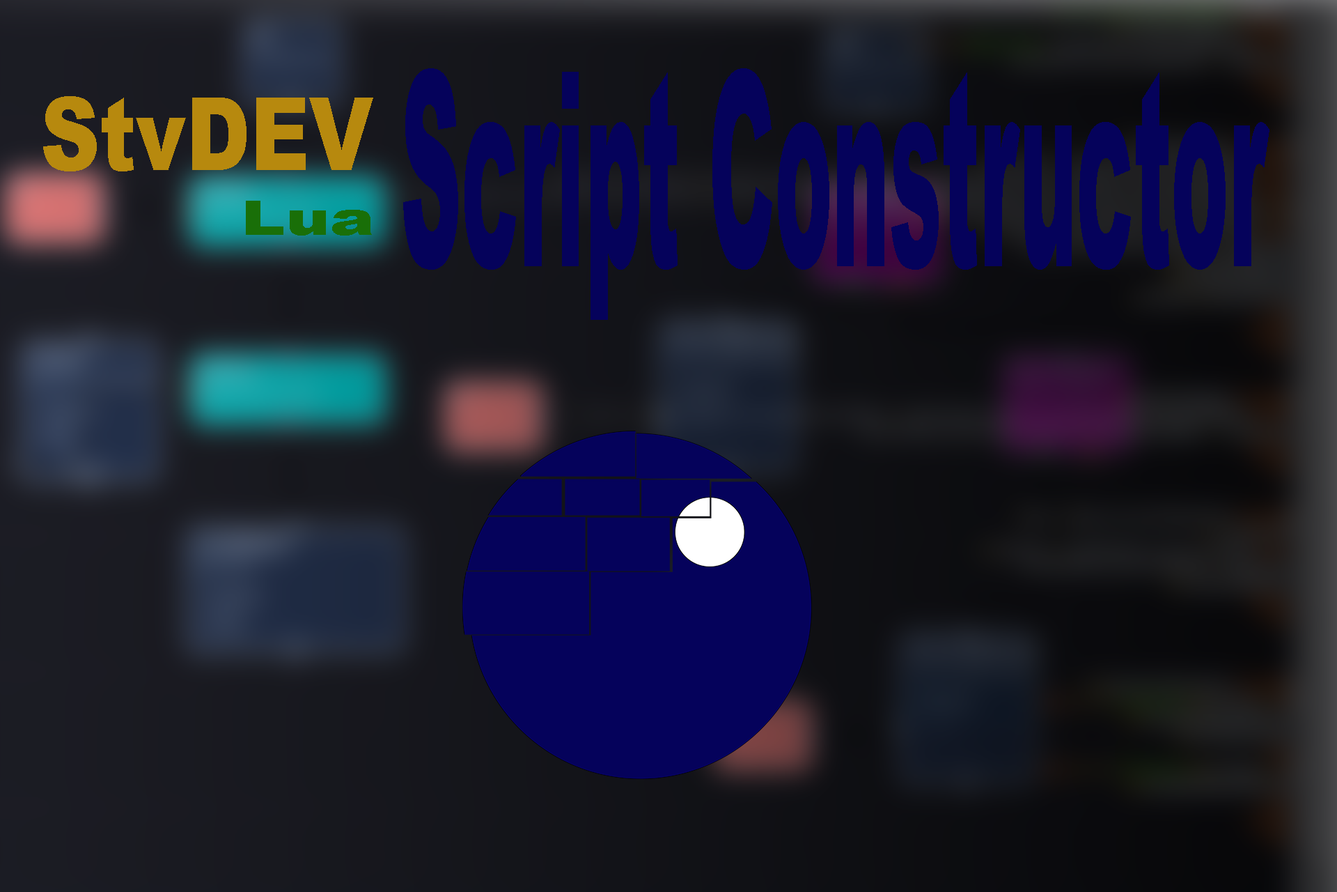
<style>
.page{position:relative;width:1337px;height:892px}
.page>*{position:absolute;margin:0}
.t1{font:271.9px "Arial-Black";color:#05025b;scale:0.31 1}
.t2{font:101.1px "Arial-Black";color:#b7890e;scale:0.81 1}
.t3{font:47.3px "Arial-Black";color:#196f08;scale:1.42 1}
</style>
<div class="page">
<p class="t1" style="left:403px;top:68px;width:867px;height:252px">Script Constructor</p>
<p class="t2" style="left:43px;top:96px;width:330px;height:75px">StvDEV</p>
<p class="t3" style="left:246px;top:201px;width:126px;height:34px">Lua</p>
</div>
